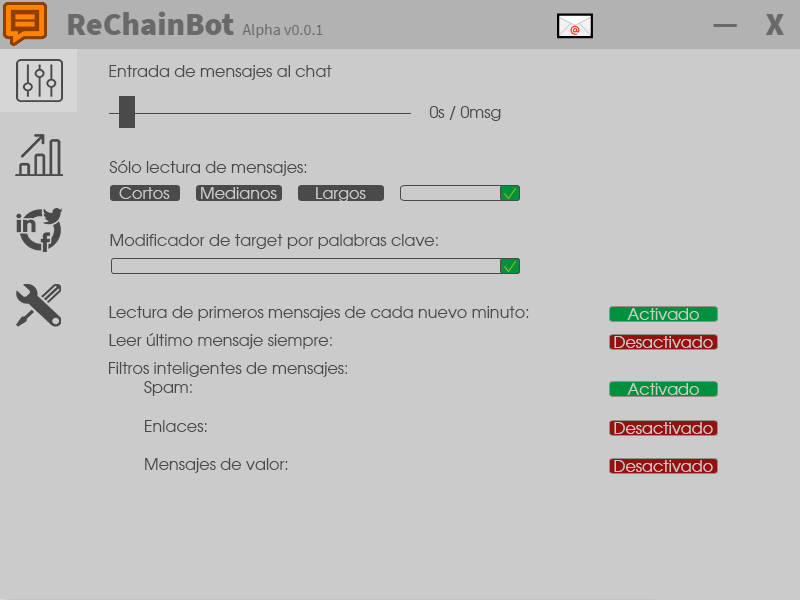
<style>
.page{position:relative;width:800px;height:600px;background:#cbcbcb}
.page>*{position:absolute;margin:0}
.t1{font:16px "AvantGarde-Book";color:#4a4a4a}
.t2{font:16px "AvantGarde-Book";color:#cbcbcb}
</style>
<div class="page">
<p class="t1" style="left:109px;top:65px;width:223px;height:15px">Entrada de mensajes al chat</p>
<p class="t1" style="left:429px;top:106px;width:72px;height:15px">0s / 0msg</p>
<p class="t1" style="left:109px;top:160px;width:198px;height:16px">Sólo lectura de mensajes:</p>
<p class="t2" style="left:119px;top:187px;width:51px;height:12px">Cortos</p>
<p class="t2" style="left:201px;top:187px;width:76px;height:12px">Medianos</p>
<p class="t2" style="left:316px;top:187px;width:50px;height:15px">Largos</p>
<p class="t1" style="left:110px;top:234px;width:328px;height:15px">Modificador de target por palabras clave:</p>
<p class="t1" style="left:109px;top:306px;width:420px;height:15px">Lectura de primeros mensajes de cada nuevo minuto:</p>
<p class="t2" style="left:627px;top:308px;width:72px;height:12px">Activado</p>
<p class="t1" style="left:109px;top:333px;width:223px;height:16px">Leer último mensaje siempre:</p>
<p class="t2" style="left:614px;top:336px;width:99px;height:12px">Desactivado</p>
<p class="t1" style="left:109px;top:362px;width:238px;height:111px;text-align:right">Filtros inteligentes de mensajes:<br> Spam:<br><br> Enlaces:<br><br> Mensajes de valor:</p>
<p class="t2" style="left:627px;top:383px;width:72px;height:12px">Activado</p>
<p class="t2" style="left:614px;top:422px;width:99px;height:12px">Desactivado</p>
<p class="t2" style="left:614px;top:460px;width:99px;height:12px">Desactivado</p>
</div>
